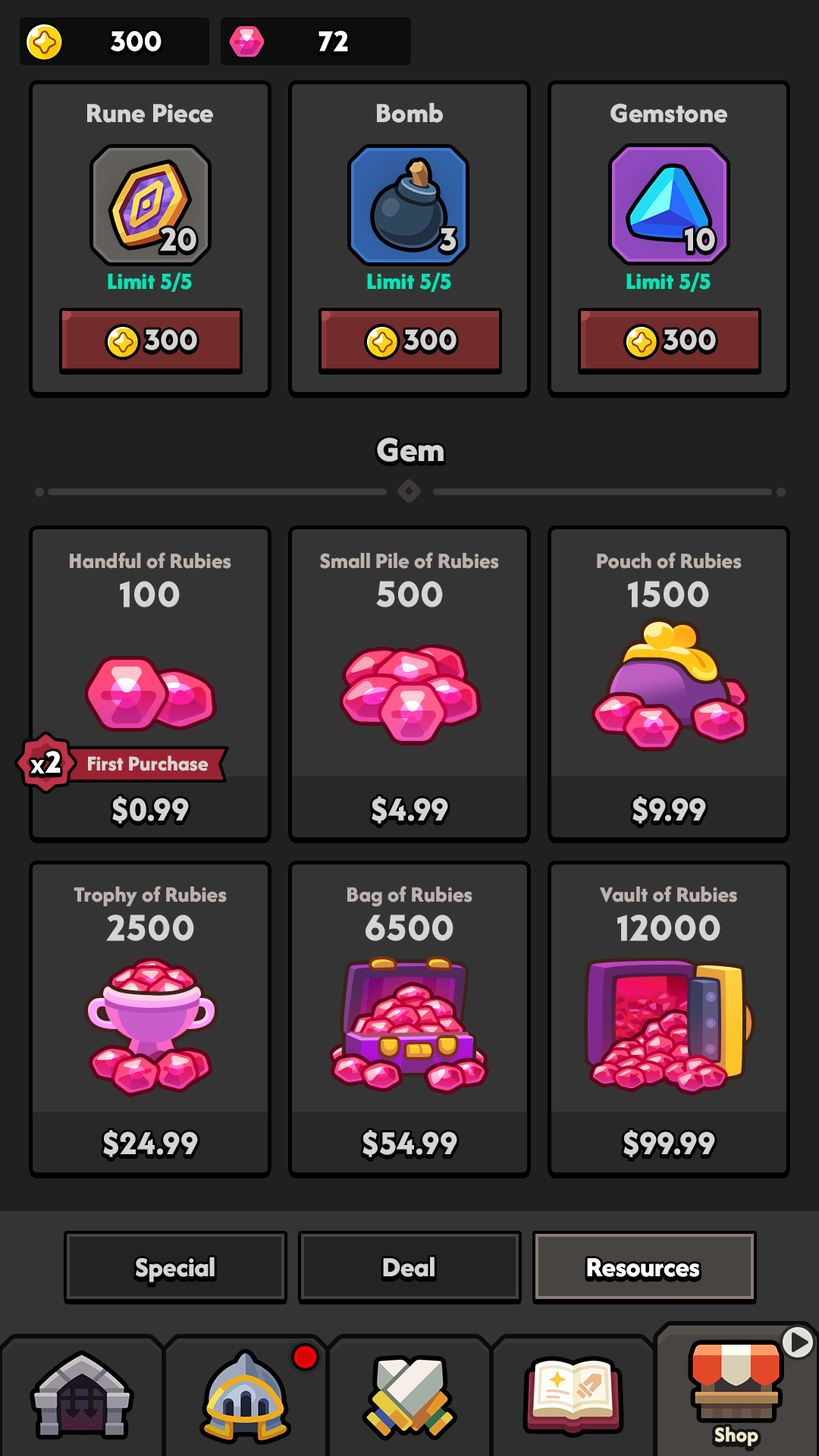
<style>
.page{position:relative;width:819px;height:1456px;background:#353434}
.page>*{position:absolute;margin:0}
.t1{font:29.6px "LTAvocado-Bold";color:#ffffff}
.t2{font:28.8px "AfacadFlux-ExtraBold";color:#d6d4d3}
.t3{font:33.4px "LTAvocado-Bold";color:#d6d4d3}
.t4{font:24.3px "AfacadFlux-ExtraBold";color:#03e5b6}
.t5{font:30.3px "LTAvocado-Bold";color:#d6d4d3}
.t6{font:36.4px "AfacadFlux-ExtraBold";color:#d6d4d3}
.t7{font:22.7px "AfacadFlux-ExtraBold";color:#bdb2ac}
.t8{font:37.9px "LTAvocado-Bold";color:#d6d4d3}
.t9{font:28.7px "LTAvocado-Bold";letter-spacing:-0.025em;color:#ffffff}
.t10{font:31.6px "LTAvocado-Bold";letter-spacing:-0.025em;color:#ffffff}
.t11{font:22px "AfacadFlux-ExtraBold";color:#d6d4d3}
.t12{font:34.9px "AfacadFlux-ExtraBold";color:#d6d4d3}
.t13{font:28.4px "AfacadFlux-ExtraBold";color:#d6d4d3}
.t14{font:28.8px "AfacadFlux-ExtraBold";color:#ffffff}
.t15{font:22px "AfacadFlux-ExtraBold";color:#f1ebcc}
</style>
<div class="page">
<p class="t1" style="left:111px;top:31px;width:51px;height:21px">300</p>
<p class="t1" style="left:318px;top:30px;width:30px;height:22px">72</p>
<p class="t2" style="left:87px;top:104px;width:126px;height:19px">Rune Piece</p>
<p class="t2" style="left:377px;top:102px;width:66px;height:21px">Bomb</p>
<p class="t2" style="left:610px;top:103px;width:117px;height:20px">Gemstone</p>
<p class="t3" style="left:160px;top:227px;width:36px;height:24px">20</p>
<p class="t3" style="left:440px;top:228px;width:16px;height:23px">3</p>
<p class="t3" style="left:685px;top:227px;width:30px;height:24px">10</p>
<p class="t4" style="left:108px;top:272px;width:84px;height:20px">Limit 5/5</p>
<p class="t4" style="left:367px;top:272px;width:84px;height:20px">Limit 5/5</p>
<p class="t4" style="left:626px;top:272px;width:85px;height:20px">Limit 5/5</p>
<p class="t5" style="left:145px;top:329px;width:52px;height:21px">300</p>
<p class="t5" style="left:404px;top:329px;width:53px;height:21px">300</p>
<p class="t5" style="left:664px;top:329px;width:52px;height:21px">300</p>
<p class="t6" style="left:377px;top:438px;width:67px;height:24px">Gem</p>
<p class="t7" style="left:70px;top:552px;width:161px;height:17px">Handful of Rubies</p>
<p class="t7" style="left:320px;top:552px;width:179px;height:17px">Small Pile of Rubies</p>
<p class="t7" style="left:597px;top:552px;width:145px;height:17px">Pouch of Rubies</p>
<p class="t8" style="left:120px;top:581px;width:60px;height:26px">100</p>
<p class="t8" style="left:376px;top:581px;width:67px;height:26px">500</p>
<p class="t8" style="left:628px;top:581px;width:81px;height:26px">1500</p>
<p class="t9" style="left:30px;top:751px;width:31px;height:22px">x<span class="t10">2</span></p>
<p class="t11" style="left:88px;top:755px;width:121px;height:16px">First Purchase</p>
<p class="t12" style="left:112px;top:796px;width:77px;height:28px">$0.99</p>
<p class="t12" style="left:372px;top:796px;width:76px;height:28px">$4.99</p>
<p class="t12" style="left:632px;top:796px;width:74px;height:28px">$9.99</p>
<p class="t7" style="left:74px;top:886px;width:153px;height:20px">Trophy of Rubies</p>
<p class="t7" style="left:347px;top:886px;width:125px;height:21px">Bag of Rubies</p>
<p class="t7" style="left:600px;top:886px;width:137px;height:16px">Vault of Rubies</p>
<p class="t8" style="left:106px;top:915px;width:88px;height:26px">2500</p>
<p class="t8" style="left:366px;top:915px;width:87px;height:26px">6500</p>
<p class="t8" style="left:617px;top:915px;width:103px;height:26px">12000</p>
<p class="t12" style="left:103px;top:1130px;width:95px;height:27px">$24.99</p>
<p class="t12" style="left:362px;top:1130px;width:95px;height:27px">$54.99</p>
<p class="t12" style="left:623px;top:1130px;width:92px;height:27px">$99.99</p>
<p class="t13" style="left:136px;top:1257px;width:79px;height:25px">Special</p>
<p class="t2" style="left:383px;top:1257px;width:52px;height:20px">Deal</p>
<p class="t14" style="left:587px;top:1258px;width:112px;height:19px">Resources</p>
<p class="t14" style="left:587px;top:1258px;width:112px;height:19px">Resources</p>
<p class="t15" style="left:714px;top:1426px;width:44px;height:20px">Shop</p>
</div>
